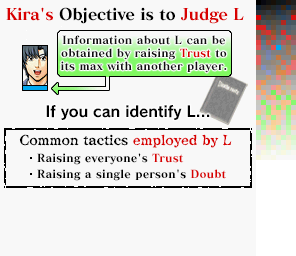
<style>
.page{position:relative;width:296px;height:256px;background:#f8f8f8}
.page>*{position:absolute;margin:0}
.t1{font:16px "MatissePro-EB";letter-spacing:-0.025em;color:#000000}
.t2{font:16px "MatissePro-EB";letter-spacing:-0.025em;color:#d80000}
.t3{font:11px/13px "MatissePro-EB";letter-spacing:0.01em;color:#101010}
.t4{font:11px/13px "MatissePro-EB";letter-spacing:0.01em;color:#d80000}
.t5{font:15px "RodinNTLGPro-B";letter-spacing:-0.01em;color:#000000}
.t6{font:14px "ComicMysteryStd-DB";letter-spacing:-0.01em;color:#000000}
.t7{font:14px "ComicMysteryStd-DB";letter-spacing:-0.01em;color:#d80000}
.t8{font:11px/16px "MatissePro-EB";letter-spacing:0.01em;color:#000000}
.t9{font:11px/16px "MatissePro-EB";letter-spacing:0.01em;color:#d80000}
</style>
<div class="page">
<p class="t1" style="left:6px;top:7px;width:238px;height:17px"><span class="t2">Kira's </span>Objective is to<span class="t2"> Judge L</span></p>
<p class="t3" style="left:60px;top:35px;width:167px;height:38px;text-align:center">Information about L can be<br>obtained by raising <span class="t4">Trust</span> to<br>its max with another player.</p>
<p class="t5" style="left:46px;top:105px;width:164px;height:15px">If you can identify L...</p>
<p class="t6" style="left:19px;top:134px;width:213px;height:14px">Common tactics <span class="t7">employed by L</span></p>
<p class="t8" style="left:37px;top:153px;width:189px;height:28px">Raising everyone's <span class="t9">Trust<br></span>Raising a single person's <span class="t9">Doubt</span></p>
</div>
